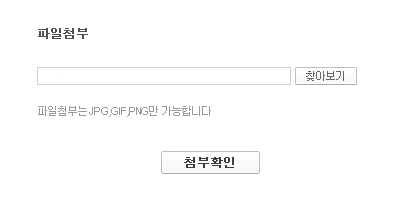
<style>
.page{position:relative;width:400px;height:200px;background:#ffffff}
.page>*{position:absolute;margin:0}
.t1{font:12px "Dotum";color:#505050;font-weight:bold}
.t2{font:11px "Dotum";letter-spacing:-0.1em;color:#999999}
.t3{font:12px "Dotum";color:#3e3c3e;font-weight:bold}
</style>
<div class="page">
<p class="t1" style="left:38px;top:28px;width:50px;height:11px">파일첨부</p>
<p class="t2" style="left:38px;top:106px;width:173px;height:11px">파일첨부는 JPG,GIF,PNG만 가능합니다</p>
<p class="t3" style="left:184px;top:157px;width:50px;height:11px">첨부확인</p>
</div>
